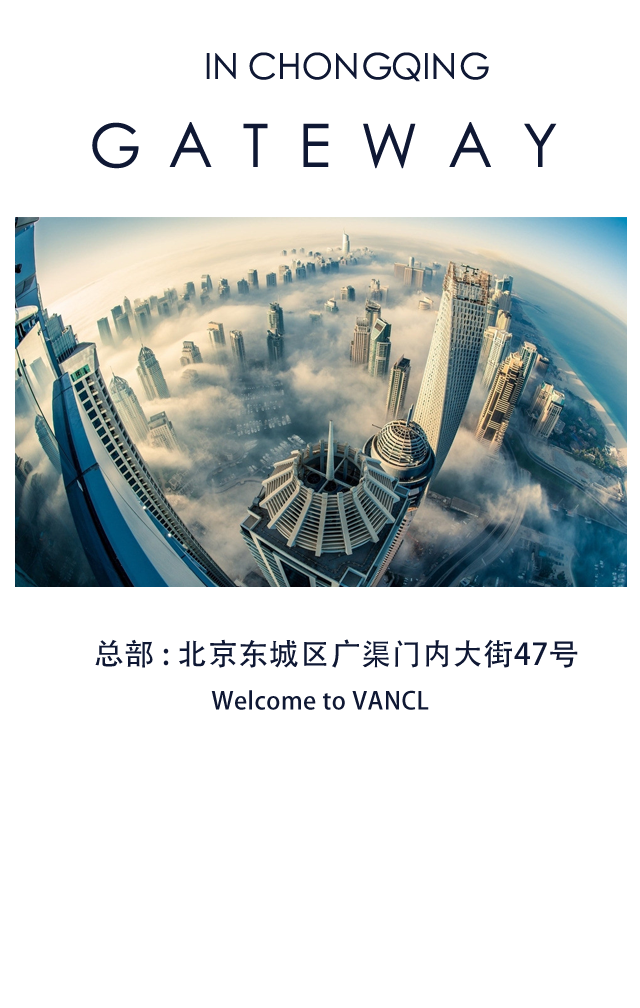
<style>
.page{position:relative;width:640px;height:1008px;background:#ffffff}
.page>*{position:absolute;margin:0}
.t1{font:36px "STXihei";color:#0f1834}
.t2{font:60px "STXihei";letter-spacing:0.5em;color:#0f1834}
.t3{font:30px "AdobeHeitiStd-Regular";letter-spacing:0.02em;color:#0f1834}
.t4{font:24px "AdobeHeitiStd-Regular";letter-spacing:0.02em;color:#0f1834}
</style>
<div class="page">
<p class="t1" style="left:206px;top:52px;width:283px;height:30px">IN CHONGQING</p>
<p class="t2" style="left:92px;top:122px;width:465px;height:47px">GATEWAY</p>
<p class="t3" style="left:95px;top:639px;width:483px;height:29px">总部 : 北京东城区广渠门内大街47号</p>
<p class="t4" style="left:211px;top:690px;width:218px;height:20px">Welcome to VANCL</p>
</div>
